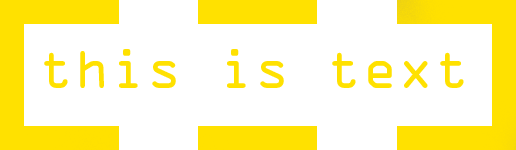
<style>
.page{position:relative;width:516px;height:150px;background:#ffffff}
.page>*{position:absolute;margin:0}
.t1{font:12px "OCRAStd";color:#ffe100}
</style>
<div class="page">
<p class="t1" style="left:44px;top:49px;width:420px;height:39px">this is text</p>
</div>
